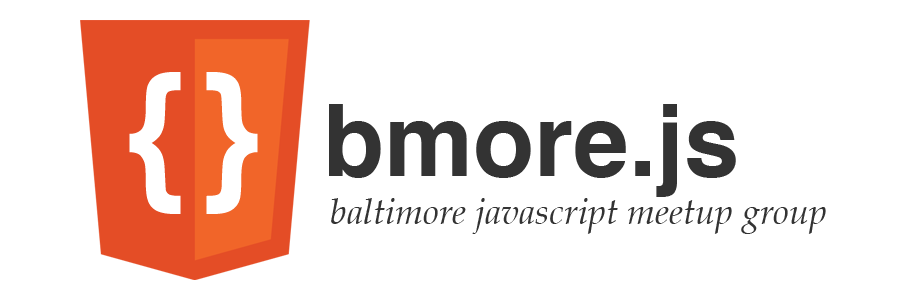
<style>
.page{position:relative;width:920px;height:300px;background:#ffffff}
.page>*{position:absolute;margin:0}
.t1{font:152.5px "Impact";color:#ffffff}
.t2{font:100px "Helvetica-Bold";color:#333333}
.t3{font:36px "Palatino-Italic";color:#333333}
</style>
<div class="page">
<p class="t1" style="left:129px;top:72px;width:129px;height:142px">{ }</p>
<p class="t2" style="left:329px;top:104px;width:407px;height:93px">bmore.js</p>
<p class="t3" style="left:331px;top:198px;width:495px;height:36px">baltimore javascript meetup group</p>
</div>
